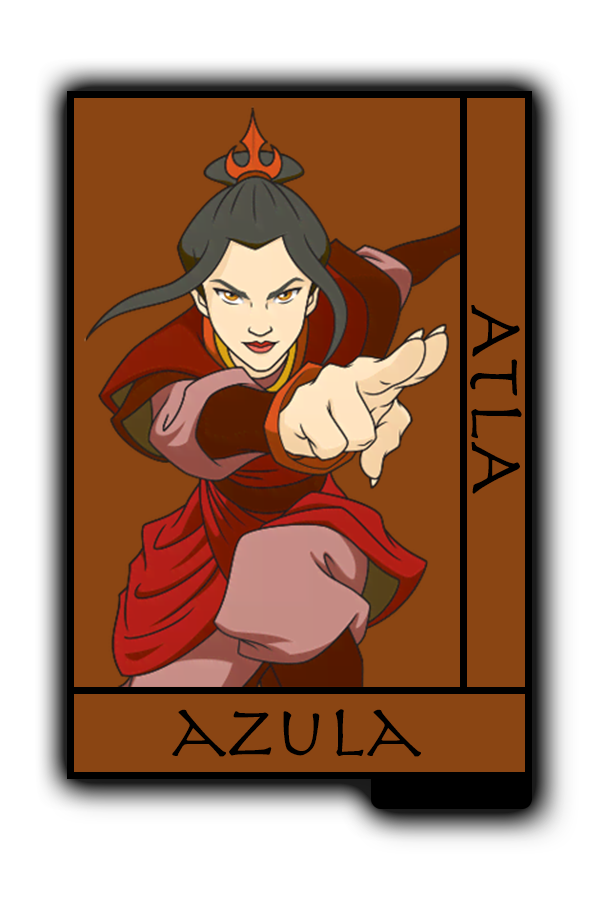
<style>
.page{position:relative;width:600px;height:900px;background:#8a4513}
.page>*{position:absolute;margin:0}
.t1{font:80.7px "Herculanum";color:#000000}
.t2{font:75px "Herculanum";color:#000000}
</style>
<div class="page">
<p class="t1" style="left:470px;top:305px;width:52px;height:189px;rotate:90deg">ATLA</p>
<p class="t2" style="left:172px;top:709px;width:249px;height:48px">azula</p>
</div>
